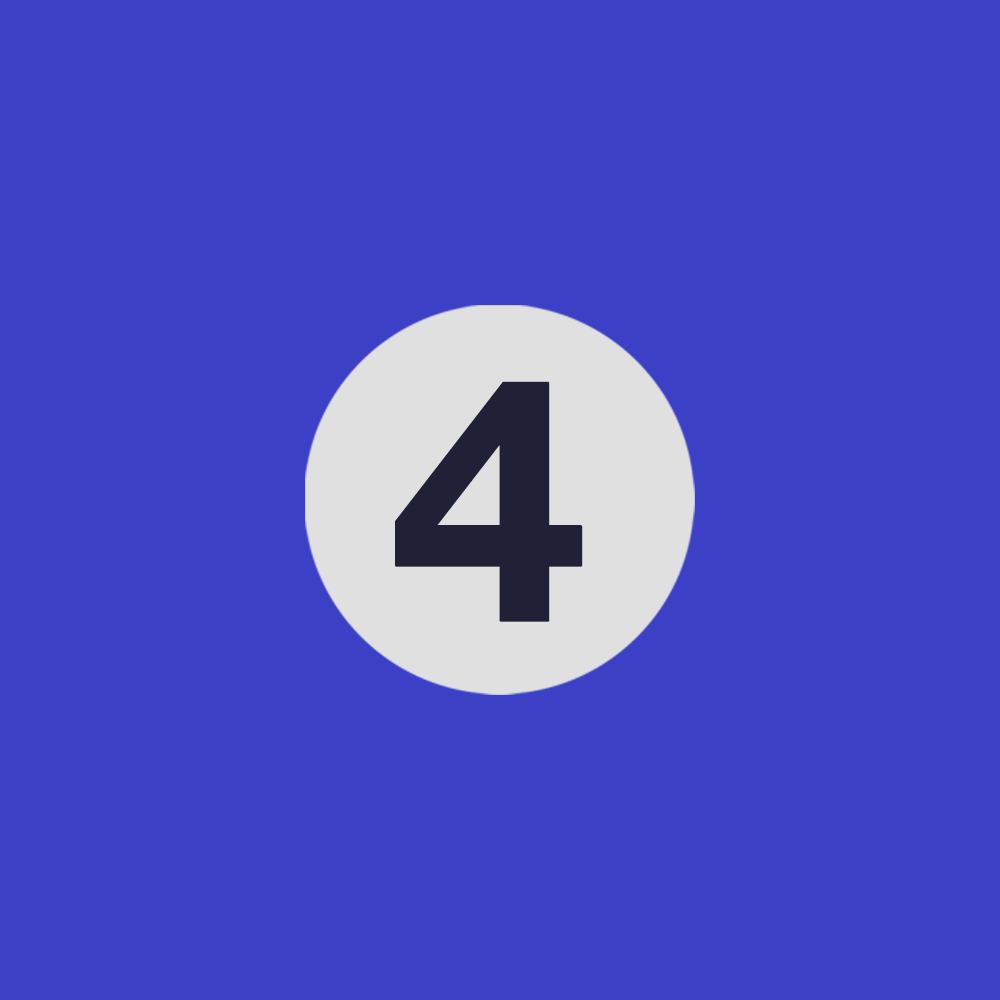
<style>
.page{position:relative;width:1000px;height:1000px;background:#3c40c6}
.page>*{position:absolute;margin:0}
.t1{font:340px "HelveticaNeue-Bold";color:#202137;font-weight:bold;scale:1.04 1}
</style>
<div class="page">
<p class="t1" style="left:395px;top:381px;width:188px;height:241px">4</p>
</div>
